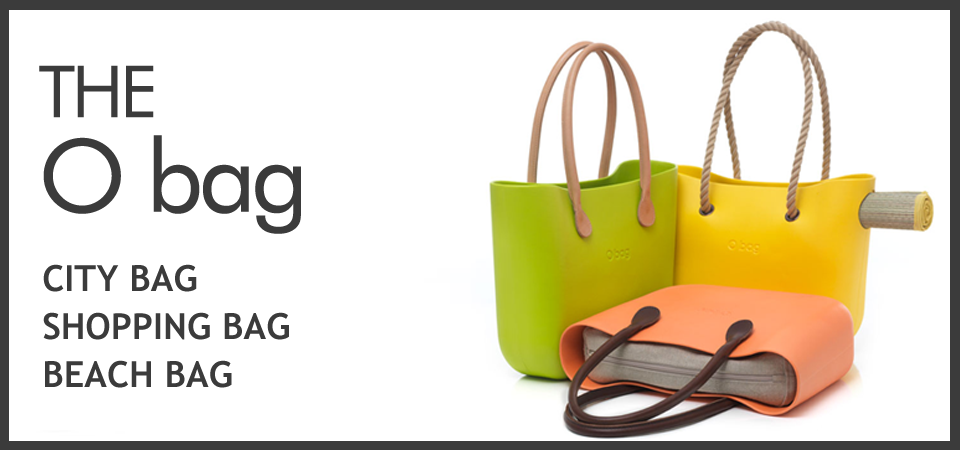
<style>
.page{position:relative;width:960px;height:450px;background:#ffffff}
.page>*{position:absolute;margin:0}
.t1{font:100.9px/94.4px "FuturaBT-Book";letter-spacing:-0.05em;color:#3b3b3b}
.t2{font:72px/94.4px "FuturaBT-Book";letter-spacing:-0.05em;color:#3b3b3b}
.t3{font:36px/48px "TrebuchetMS-Bold";color:#3b3b3b}
</style>
<div class="page">
<p class="t1" style="left:39px;top:65px;width:262px;height:169px"><span class="t2">THE <br></span>O bag</p>
<p class="t3" style="left:43px;top:264px;width:246px;height:124px">CITY BAG <br>SHOPPING BAG   <br>BEACH BAG</p>
</div>
